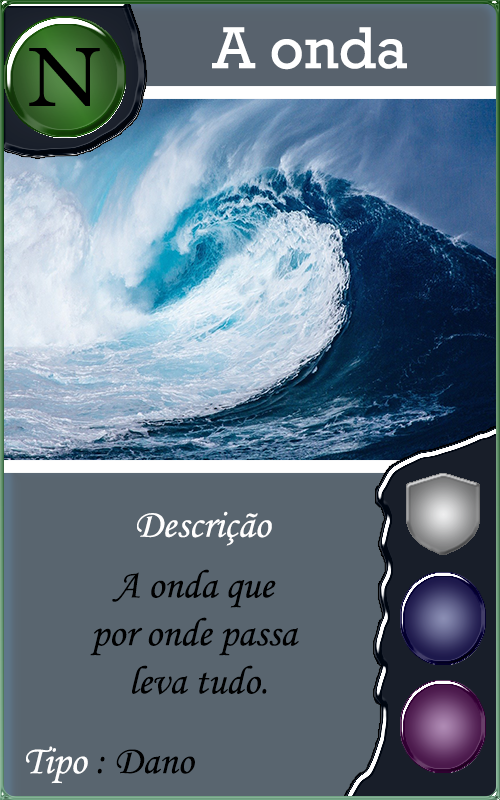
<style>
.page{position:relative;width:500px;height:800px;background:#59656f}
.page>*{position:absolute;margin:0}
.t1{font:60px "Rockwell";color:#ffffff}
.t2{font:40px "MonotypeCorsiva";color:#fffefe}
.t3{font:40px "MonotypeCorsiva";color:#000000}
</style>
<div class="page">
<p class="t1" style="left:212px;top:27px;width:195px;height:43px">A onda</p>
<p class="t2" style="left:137px;top:511px;width:135px;height:35px">Descrição</p>
<p class="t3" style="left:90px;top:569px;width:209px;height:126px;text-align:center">A onda que <br>por onde passa <br>leva tudo.</p>
</div>
